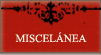
<style>
.page{position:relative;width:101px;height:55px}
.page>*{position:absolute;margin:0}
.t1{font:11px "TimesNewRomanPSMT";color:#f5efde}
</style>
<div class="page">
<p class="t1" style="left:15px;top:32px;width:72px;height:11px">MISCELÁNEA</p>
</div>
